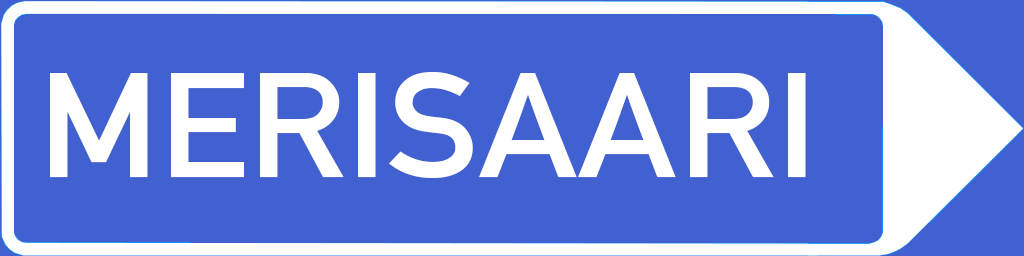
<style>
.page{position:relative;width:1024px;height:256px;background:#4261d1}
.page>*{position:absolute;margin:0}
.t1{font:145.6px "AlteDIN1451Mittelschrift";color:#ffffff;scale:1.1 1}
</style>
<div class="page">
<p class="t1" style="left:50px;top:72px;width:756px;height:106px">MERISAARI</p>
</div>
